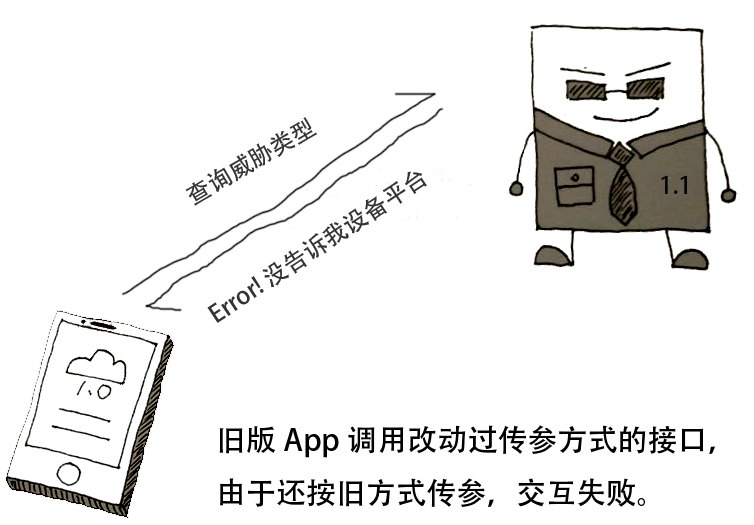
<style>
.page{position:relative;width:754px;height:525px;background:#ffffff}
.page>*{position:absolute;margin:0}
.t1{font:24px "AdobeHeitiStd-Regular";color:#333333}
.t2{font:30px "AdobeHeitiStd-Regular";color:#000000}
</style>
<div class="page">
<p class="t1" style="left:185px;top:117px;width:132px;height:89px;rotate:-30deg">查询威胁类型</p>
<p class="t1" style="left:207px;top:171px;width:220px;height:152px;rotate:-33deg">Error! 没告诉我设备平台</p>
<p class="t2" style="left:219px;top:425px;width:496px;height:82px">旧版App调用改动过传参方式的接口，<br>由于还按旧方式传参，交互失败。</p>
</div>
